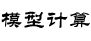
<style>
.page{position:relative;width:91px;height:41px;background:#ffffff}
.page>*{position:absolute;margin:0}
.t1{font:22.7px "STLiti";color:#000000}
</style>
<div class="page">
<p class="t1" style="left:1px;top:11px;width:89px;height:17px">模型计算</p>
</div>
